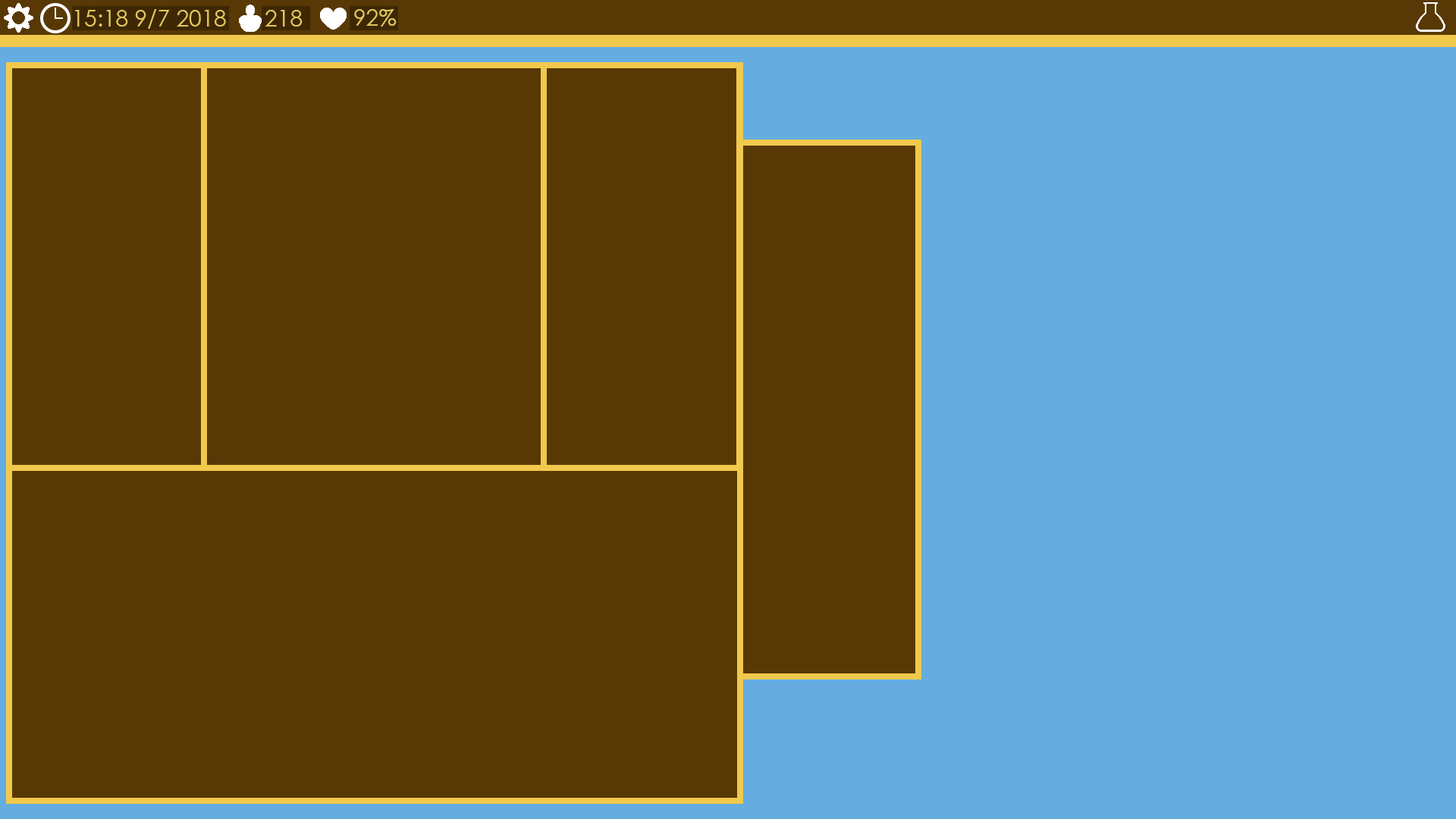
<style>
.page{position:relative;width:1456px;height:819px;background:#583905}
.page>*{position:absolute;margin:0}
.t1{font:22.7px "CenturyGothic";color:#e1c75e}
</style>
<div class="page">
<p class="t1" style="left:74px;top:9px;width:152px;height:20px">15:18 9/7 2018</p>
<p class="t1" style="left:265px;top:10px;width:38px;height:17px">218</p>
<p class="t1" style="left:354px;top:9px;width:43px;height:18px">92%</p>
</div>
